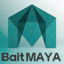
<style>
.page{position:relative;width:64px;height:64px}
.page>*{position:absolute;margin:0}
.t1{font:11.8px "Arial-BoldMT";letter-spacing:-0.04em;color:#393939;scale:1.08 1}
</style>
<div class="page">
<p class="t1" style="left:26px;top:52px;width:35px;height:10px">MAYA</p>
</div>
